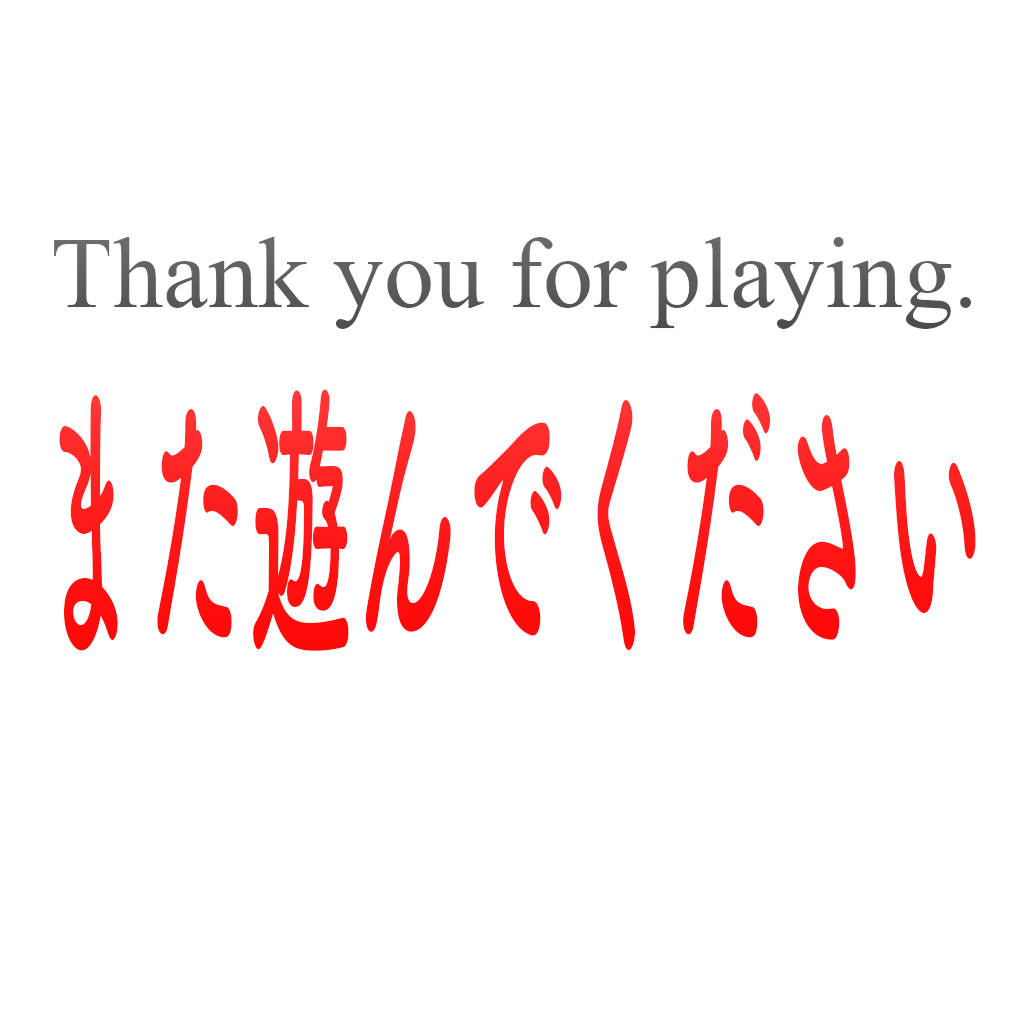
<style>
.page{position:relative;width:1024px;height:1024px;background:#ffffff}
.page>*{position:absolute;margin:0}
.t1{font:150px "Microsoft-Himalaya";color:#5b5b5b}
.t2{font:299.3px "TsukuBRdGothicStd-B";color:#ff1919;scale:0.35 1}
</style>
<div class="page">
<p class="t1" style="left:54px;top:237px;width:918px;height:92px">Thank you for playing.</p>
<p class="t2" style="left:59px;top:389px;width:917px;height:262px">また遊んでください</p>
</div>
